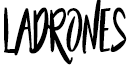
<style>
.page{position:relative;width:128px;height:68px;background:#ffffff}
.page>*{position:absolute;margin:0}
.t1{font:44.6px "BeautyandtheBeast";color:#000000;scale:0.68 1}
</style>
<div class="page">
<p class="t1" style="left:4px;top:0px;width:123px;height:65px">LAdrones</p>
</div>
